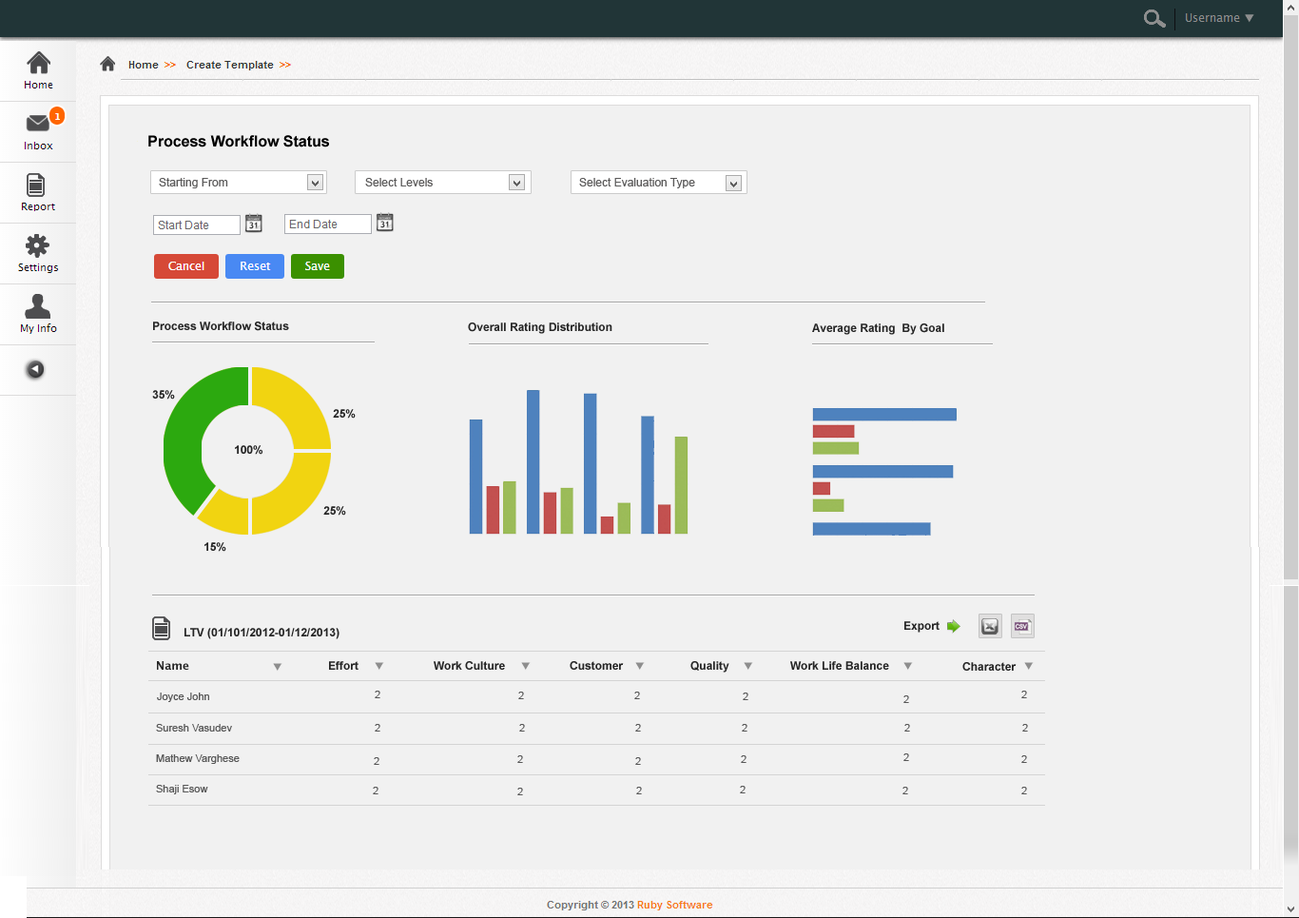
<style>
.page{position:relative;width:1299px;height:918px;background:#f1f1f1}
.page>*{position:absolute;margin:0}
.t1{font:15.2px "Arial-BoldMT";color:#000000}
.t2{font:11.4px "ArialMT";color:#5b5a5a}
.t3{font:11.4px "Arial-BoldMT";color:#262626}
.t4{font:11.4px "Arial-BoldMT";color:#252525}
.t5{font:11.4px "LucidaGrande-Bold";color:#262626}
.t6{font:10.5px "ArialMT";color:#575757}
</style>
<div class="page">
<p class="t1" style="left:148px;top:135px;width:181px;height:12px">Process Workflow Status</p>
<p class="t2" style="left:159px;top:178px;width:69px;height:10px">Starting From</p>
<p class="t2" style="left:365px;top:178px;width:68px;height:8px">Select Levels</p>
<p class="t2" style="left:579px;top:178px;width:116px;height:10px">Select Evaluation Type</p>
<p class="t3" style="left:153px;top:321px;width:136px;height:10px">Process Workflow Status</p>
<p class="t3" style="left:468px;top:322px;width:145px;height:12px">Overall Rating Distribution</p>
<p class="t3" style="left:812px;top:323px;width:132px;height:12px">Average Rating  By Goal</p>
<p class="t4" style="left:152px;top:390px;width:23px;height:9px">35%</p>
<p class="t4" style="left:333px;top:409px;width:23px;height:9px">25%</p>
<p class="t4" style="left:235px;top:445px;width:28px;height:10px">100%</p>
<p class="t4" style="left:323px;top:506px;width:23px;height:9px">25%</p>
<p class="t4" style="left:204px;top:542px;width:22px;height:10px">15%</p>
<p class="t4" style="left:185px;top:628px;width:155px;height:11px">LTV (01/101/2012-01/12/2013)</p>
<p class="t4" style="left:904px;top:621px;width:36px;height:11px">Export</p>
<p class="t5" style="left:157px;top:661px;width:32px;height:9px">Name</p>
<p class="t4" style="left:329px;top:661px;width:30px;height:9px">Effort</p>
<p class="t4" style="left:434px;top:661px;width:71px;height:9px">Work Culture</p>
<p class="t4" style="left:570px;top:661px;width:54px;height:9px">Customer</p>
<p class="t4" style="left:691px;top:661px;width:38px;height:11px">Quality</p>
<p class="t4" style="left:790px;top:661px;width:99px;height:9px">Work Life Balance</p>
<p class="t4" style="left:963px;top:662px;width:54px;height:9px">Character</p>
<p class="t6" style="left:157px;top:692px;width:52px;height:10px">Joyce John</p>
<p class="t6" style="left:375px;top:691px;width:5px;height:7px">2</p>
<p class="t6" style="left:518px;top:691px;width:6px;height:8px">2</p>
<p class="t6" style="left:634px;top:691px;width:6px;height:8px">2</p>
<p class="t6" style="left:743px;top:692px;width:6px;height:8px">2</p>
<p class="t6" style="left:904px;top:695px;width:5px;height:8px">2</p>
<p class="t6" style="left:1021px;top:691px;width:6px;height:7px">2</p>
<p class="t6" style="left:156px;top:724px;width:76px;height:7px">Suresh Vasudev</p>
<p class="t6" style="left:375px;top:724px;width:5px;height:7px">2</p>
<p class="t6" style="left:519px;top:724px;width:6px;height:7px">2</p>
<p class="t6" style="left:635px;top:724px;width:6px;height:7px">2</p>
<p class="t6" style="left:742px;top:724px;width:6px;height:7px">2</p>
<p class="t6" style="left:904px;top:724px;width:6px;height:7px">2</p>
<p class="t6" style="left:1022px;top:724px;width:6px;height:7px">2</p>
<p class="t6" style="left:156px;top:754px;width:84px;height:10px">Mathew Varghese</p>
<p class="t6" style="left:374px;top:757px;width:5px;height:8px">2</p>
<p class="t6" style="left:517px;top:755px;width:6px;height:8px">2</p>
<p class="t6" style="left:635px;top:757px;width:6px;height:8px">2</p>
<p class="t6" style="left:741px;top:755px;width:6px;height:8px">2</p>
<p class="t6" style="left:904px;top:753px;width:5px;height:8px">2</p>
<p class="t6" style="left:1021px;top:755px;width:6px;height:8px">2</p>
<p class="t6" style="left:156px;top:785px;width:52px;height:9px">Shaji Esow</p>
<p class="t6" style="left:740px;top:786px;width:6px;height:7px">2</p>
<p class="t6" style="left:373px;top:787px;width:6px;height:7px">2</p>
<p class="t6" style="left:517px;top:788px;width:6px;height:7px">2</p>
<p class="t6" style="left:636px;top:787px;width:6px;height:7px">2</p>
<p class="t6" style="left:903px;top:787px;width:5px;height:7px">2</p>
<p class="t6" style="left:1021px;top:787px;width:6px;height:7px">2</p>
</div>
